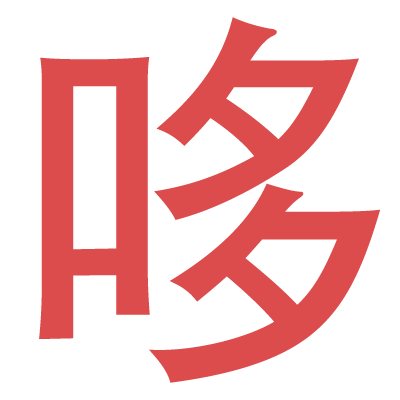
<style>
.page{position:relative;width:400px;height:400px;background:#ffffff}
.page>*{position:absolute;margin:0}
.t1{font:400px "AdobeHeitiStd-Regular";color:#dc4c4c}
</style>
<div class="page">
<p class="t1" style="left:39px;top:17px;width:341px;height:366px">哆</p>
</div>
